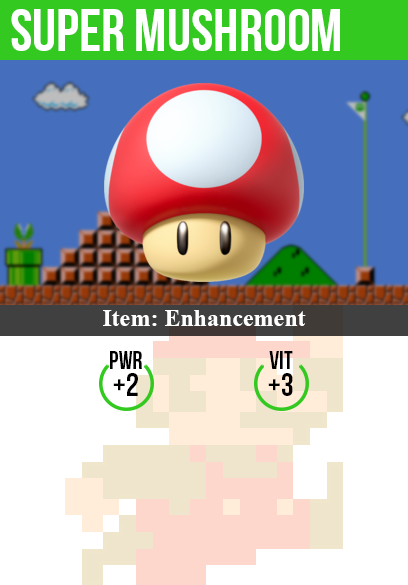
<style>
.page{position:relative;width:408px;height:585px;background:#ffffff}
.page>*{position:absolute;margin:0}
.t1{font:60px "BebasNeue";color:#ffffff}
.t2{font:24px "TimesNewRomanPS-BoldMT";color:#ffffff}
.t3{font:25px "BebasNeue";color:#000000}
.t4{font:32px "BebasNeue";color:#000000}
</style>
<div class="page">
<p class="t1" style="left:11px;top:9px;width:329px;height:42px">super mushroom</p>
<p class="t2" style="left:103px;top:310px;width:203px;height:16px">Item: Enhancement</p>
<p class="t3" style="left:110px;top:351px;width:32px;height:18px">pwr</p>
<p class="t3" style="left:269px;top:351px;width:24px;height:18px">vit</p>
<p class="t4" style="left:113px;top:373px;width:25px;height:23px">+2</p>
<p class="t4" style="left:268px;top:373px;width:25px;height:23px">+3</p>
</div>
